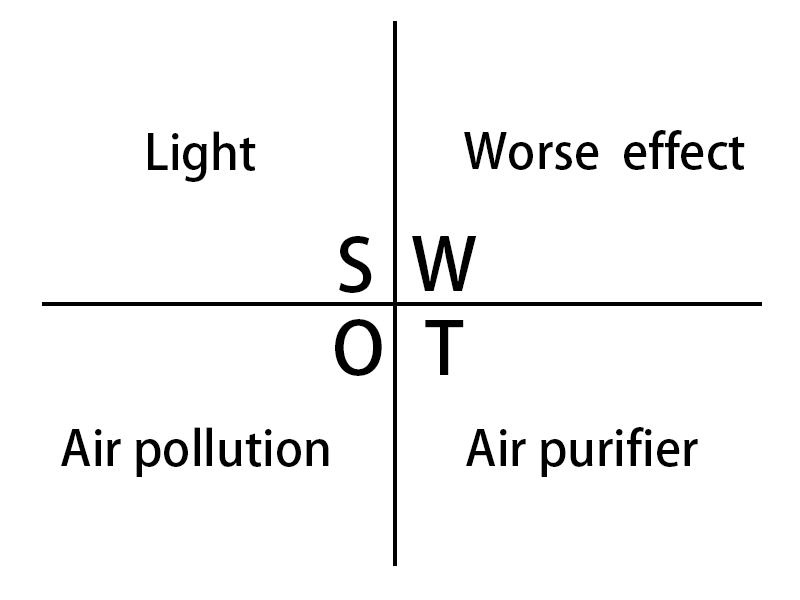
<style>
.page{position:relative;width:800px;height:600px;background:#ffffff}
.page>*{position:absolute;margin:0}
.t1{font:48px "AdobeFanHeitiStd-Bold";color:#000000}
.t2{font:72px "AdobeFanHeitiStd-Bold";color:#000000}
</style>
<div class="page">
<p class="t1" style="left:148px;top:131px;width:108px;height:51px">Light</p>
<p class="t1" style="left:464px;top:130px;width:281px;height:40px">Worse  effect</p>
<p class="t2" style="left:339px;top:236px;width:33px;height:57px">S</p>
<p class="t2" style="left:412px;top:236px;width:65px;height:55px">W</p>
<p class="t2" style="left:335px;top:319px;width:47px;height:57px">O</p>
<p class="t2" style="left:425px;top:320px;width:39px;height:55px">T</p>
<p class="t1" style="left:61px;top:427px;width:268px;height:50px">Air pollution</p>
<p class="t1" style="left:466px;top:427px;width:232px;height:50px">Air purifier</p>
</div>
